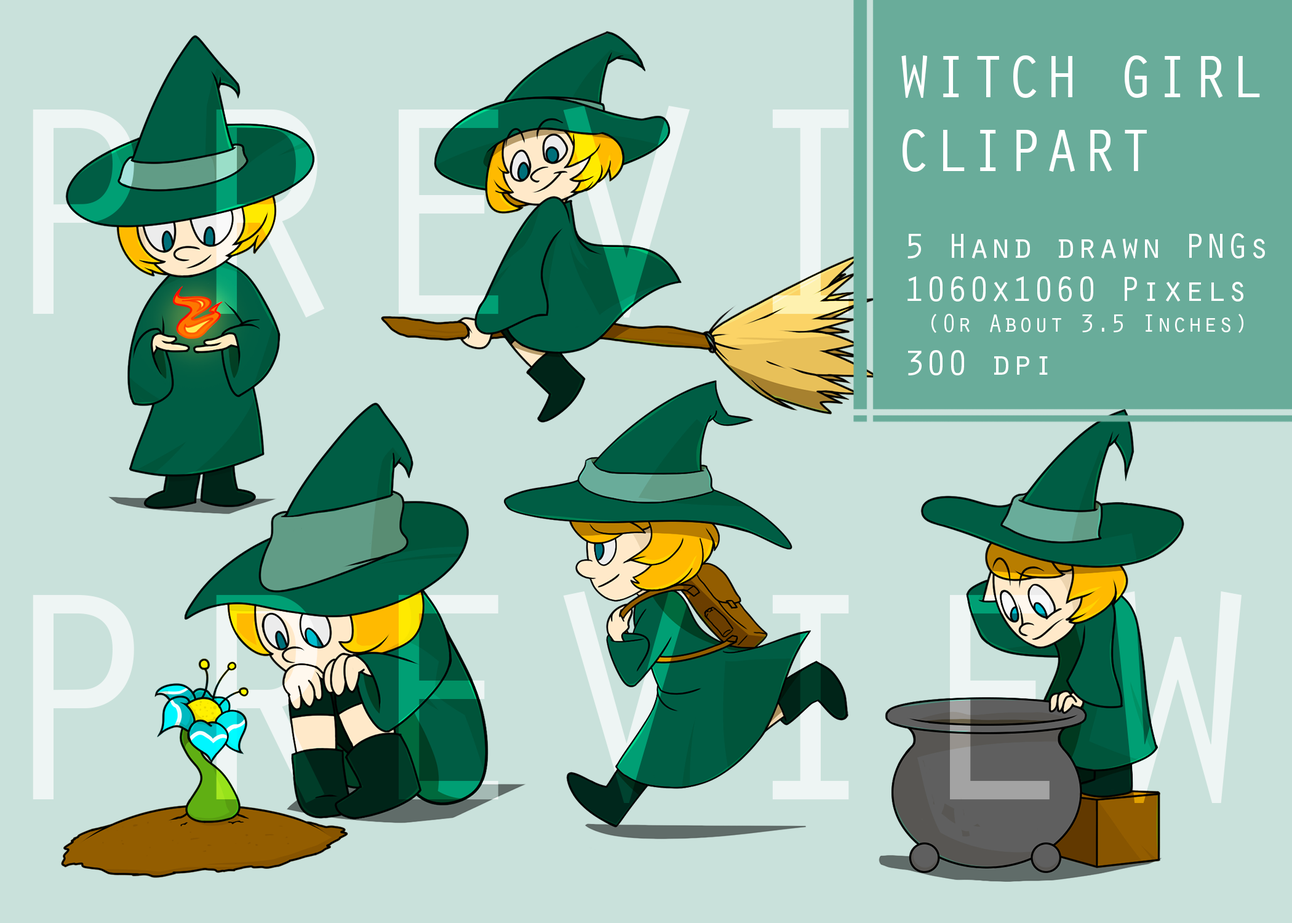
<style>
.page{position:relative;width:1292px;height:923px;background:#c9e1db}
.page>*{position:absolute;margin:0}
.t1{font:61.6px "OratorStd";color:#ffffff}
.t2{font:35.9px "OratorStd";color:#ffffff}
.t3{font:25.7px "OratorStd";color:#ffffff}
</style>
<div class="page">
<p class="t1" style="left:901px;top:55px;width:359px;height:117px">WITCH GIRL <br>CLIPART</p>
<p class="t2" style="left:908px;top:233px;width:357px;height:142px">5 Hand drawn PNGs<br>1060x1060 Pixels<br> <span class="t3">(Or About 3.5 Inches)<br></span>300 dpi</p>
</div>
